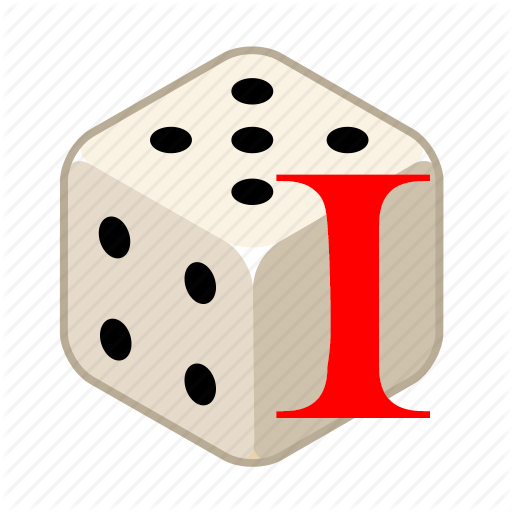
<style>
.page{position:relative;width:512px;height:512px;background:#ffffff}
.page>*{position:absolute;margin:0}
.t1{font:357px "EngraversMT";color:#ff0000}
</style>
<div class="page">
<p class="t1" style="left:276px;top:174px;width:154px;height:244px">i</p>
</div>
